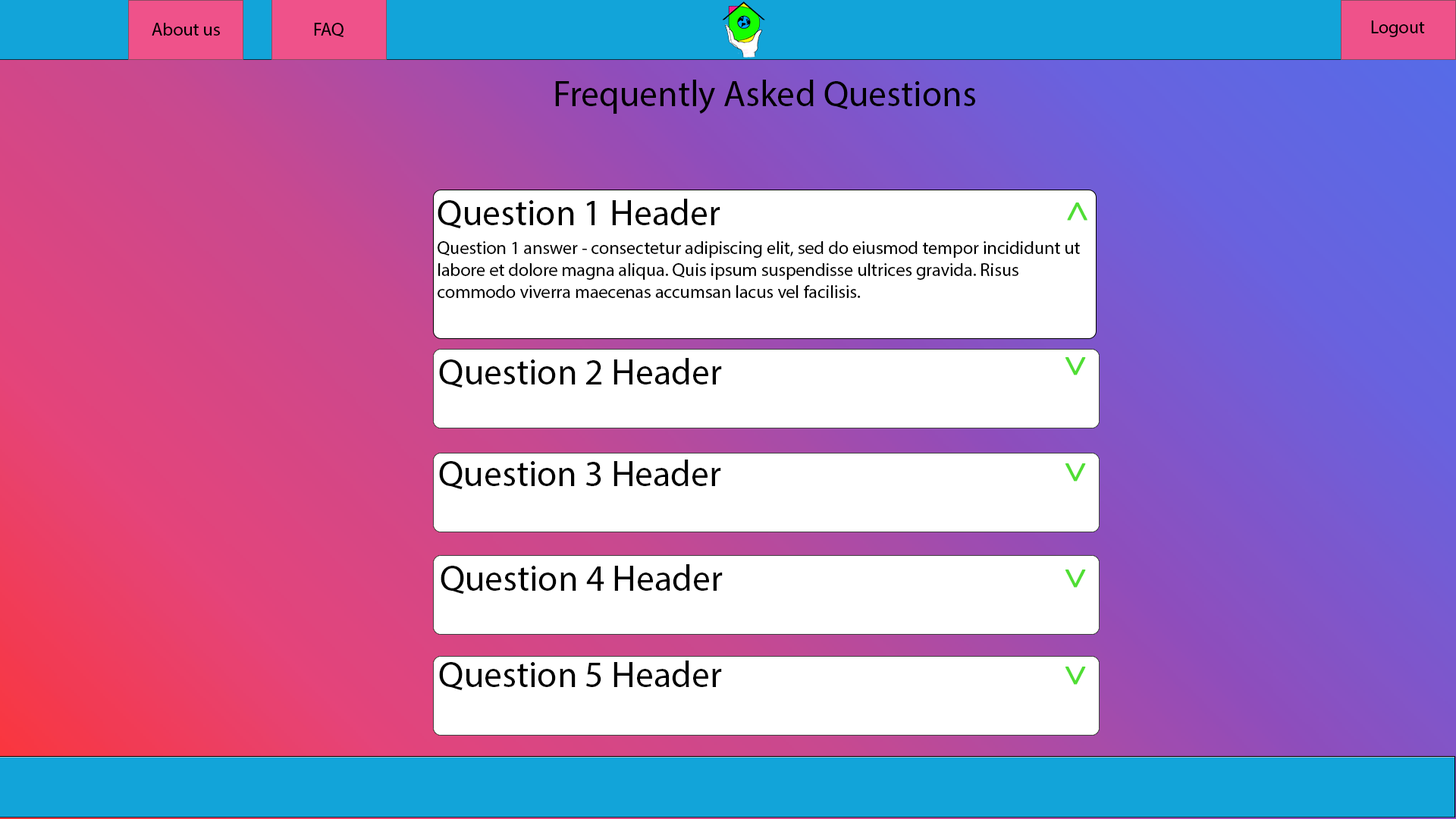
<style>
.page{position:relative;width:1456px;height:819px;background:#ffffff}
.page>*{position:absolute;margin:0}
.t1{font:18.2px "MyriadPro-Regular";color:#000000}
.t2{font:36.4px "MyriadPro-Regular";color:#000000}
.t3{font:36.4px "MyriadPro-Regular";color:#50de34;font-weight:bold}
</style>
<div class="page">
<p class="t1" style="left:152px;top:23px;width:68px;height:13px">About us</p>
<p class="t1" style="left:314px;top:23px;width:30px;height:14px">FAQ</p>
<p class="t1" style="left:1371px;top:20px;width:54px;height:17px">Logout</p>
<p class="t2" style="left:555px;top:80px;width:420px;height:34px">Frequently Asked Questions</p>
<p class="t2" style="left:438px;top:199px;width:282px;height:30px">Question 1 Header</p>
<p class="t3" style="left:1067px;top:202px;width:20px;height:19px;rotate:-90deg">&gt;</p>
<p class="t1" style="left:438px;top:241px;width:642px;height:57px">Question 1 answer - consectetur adipiscing elit, sed do eiusmod tempor incididunt ut labore et dolore magna aliqua. Quis ipsum suspendisse ultrices gravida. Risus commodo viverra maecenas accumsan lacus vel facilisis.</p>
<p class="t2" style="left:439px;top:358px;width:283px;height:30px">Question 2 Header</p>
<p class="t3" style="left:1065px;top:357px;width:21px;height:18px;rotate:90deg">&gt;</p>
<p class="t2" style="left:439px;top:460px;width:282px;height:30px">Question 3 Header</p>
<p class="t3" style="left:1065px;top:463px;width:21px;height:19px;rotate:90deg">&gt;</p>
<p class="t2" style="left:441px;top:564px;width:282px;height:31px">Question 4 Header</p>
<p class="t3" style="left:1065px;top:570px;width:21px;height:18px;rotate:90deg">&gt;</p>
<p class="t2" style="left:439px;top:660px;width:283px;height:31px">Question 5 Header</p>
<p class="t3" style="left:1065px;top:667px;width:21px;height:18px;rotate:90deg">&gt;</p>
</div>
